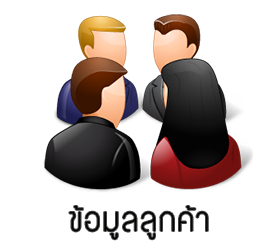
<style>
.page{position:relative;width:280px;height:245px;background:#ffffff}
.page>*{position:absolute;margin:0}
.t1{font:30px "BangnaNew";color:#020200}
</style>
<div class="page">
<p class="t1" style="left:69px;top:206px;width:139px;height:34px">ข้อมูลลูกค้า</p>
</div>
